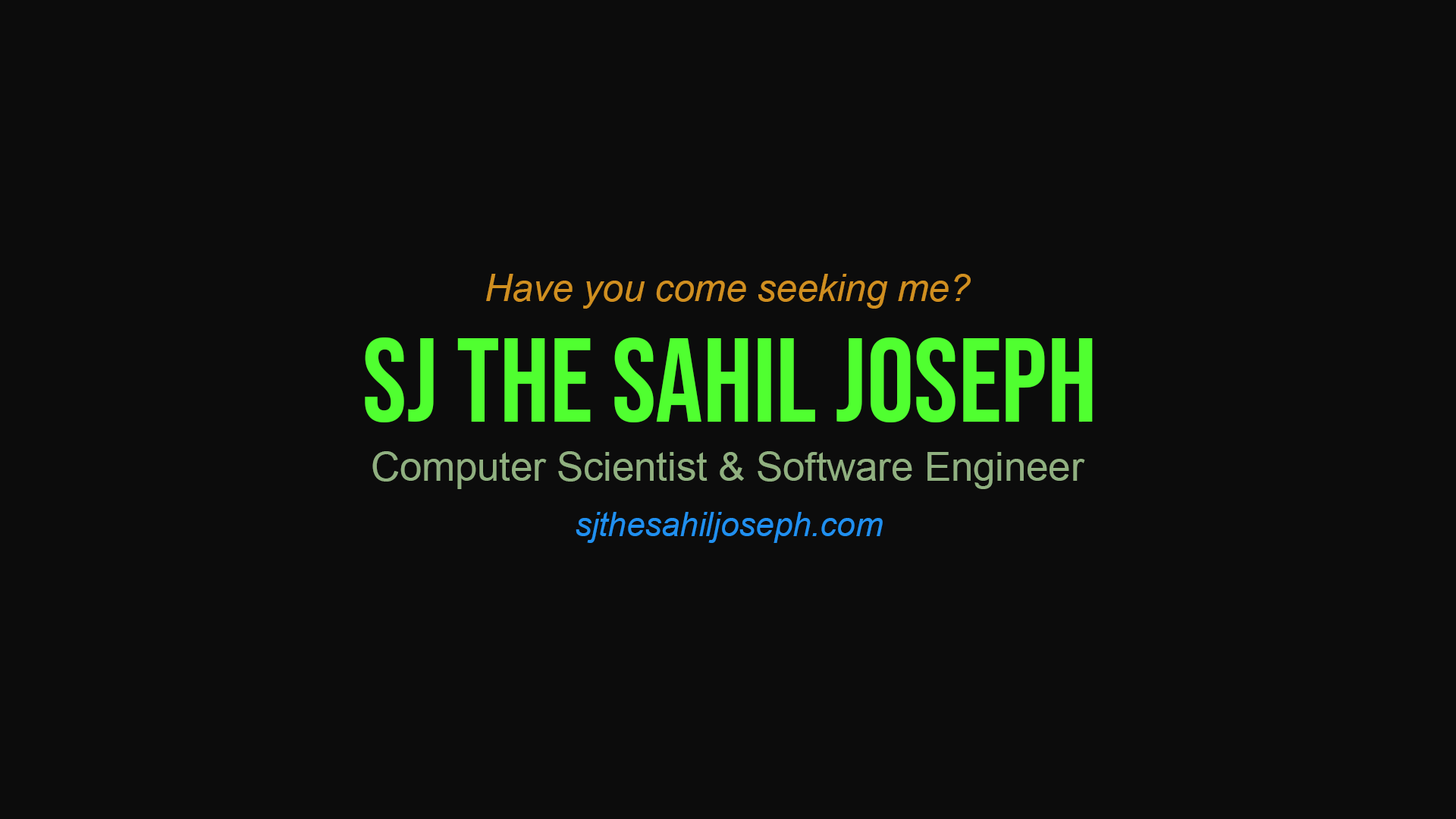
<style>
.page{position:relative;width:1456px;height:819px;background:#0c0c0c}
.page>*{position:absolute;margin:0}
.t1{font:37.9px "Arial-ItalicMT";color:#d08f20}
.t2{font:119.4px "BebasNeue-Regular";color:#50ff30}
.t3{font:40.1px "ArialMT";color:#90b080}
.t4{font:33.4px "Arial-ItalicMT";color:#2090f0}
</style>
<div class="page">
<p class="t1" style="left:486px;top:274px;width:485px;height:35px">Have you come seeking me?</p>
<p class="t2" style="left:365px;top:337px;width:728px;height:85px">SJ the Sahil Joseph</p>
<p class="t3" style="left:372px;top:451px;width:713px;height:38px">Computer Scientist &amp; Software Engineer</p>
<p class="t4" style="left:576px;top:512px;width:307px;height:31px">sjthesahiljoseph.com</p>
</div>
